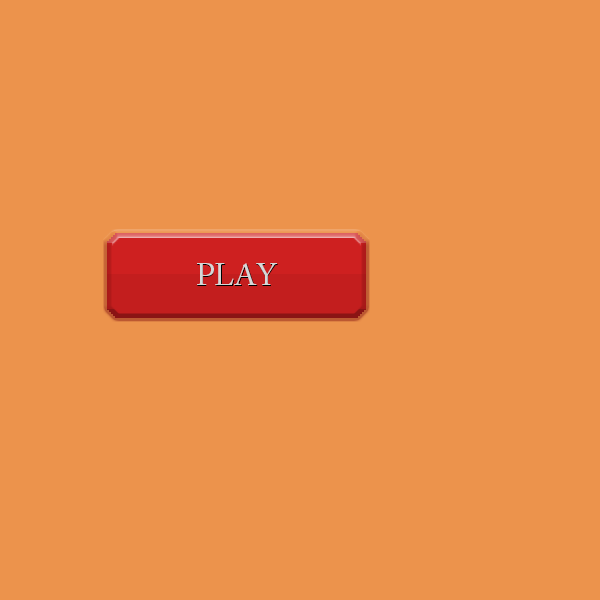
<style>
.page{position:relative;width:600px;height:600px;background:#ec934c}
.page>*{position:absolute;margin:0}
.t1{font:30px "ACaslonPro-Regular"}
.t2{font:30px "ACaslonPro-Regular";color:#d7d7d7}
</style>
<div class="page">
<p class="t1" style="left:197px;top:264px;width:81px;height:22px">PLAY</p>
<p class="t2" style="left:197px;top:263px;width:80px;height:22px">PLAY</p>
</div>
